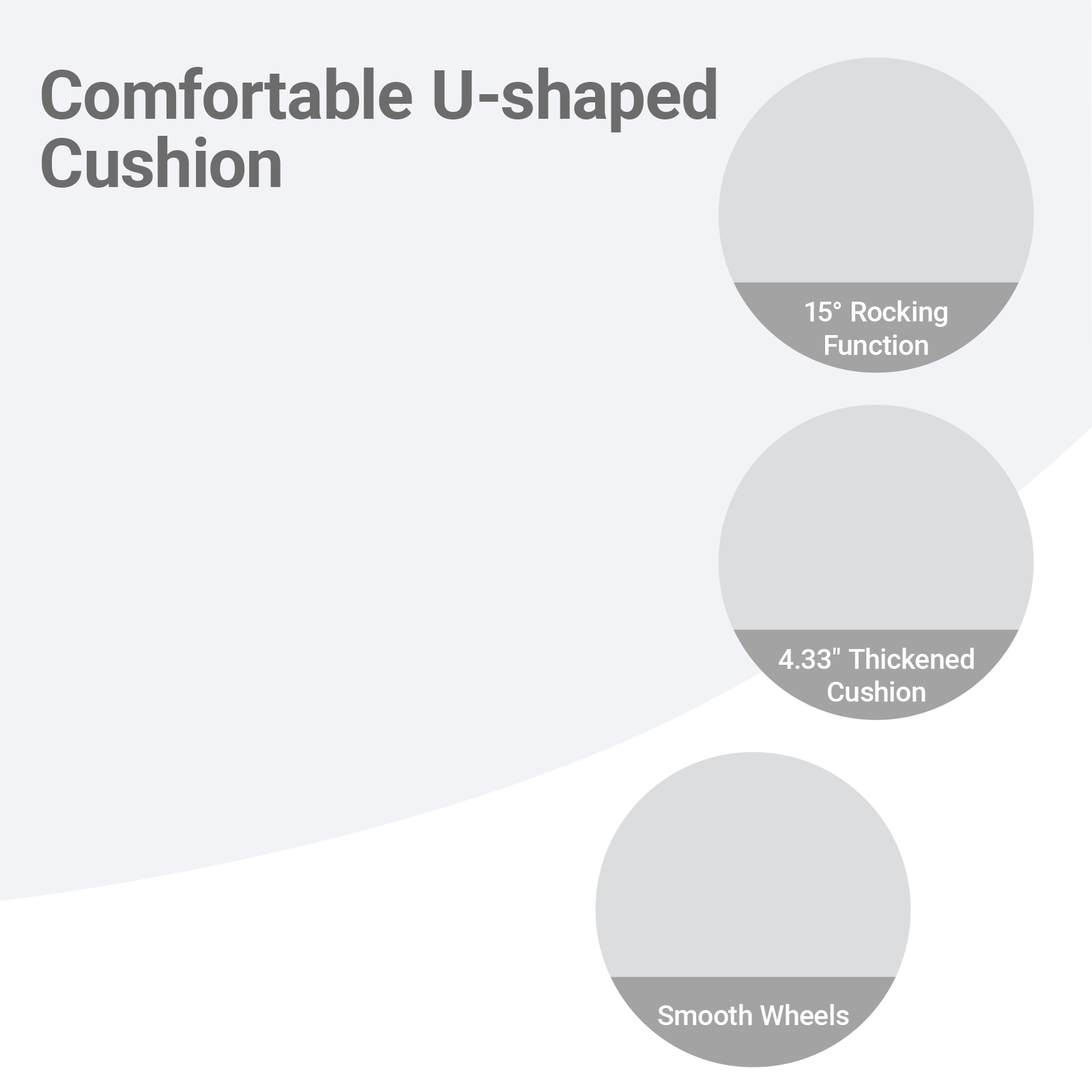
<style>
.page{position:relative;width:1092px;height:1092px;background:#f2f3f6}
.page>*{position:absolute;margin:0}
.t1{font:68.4px/68.4px "Roboto-Bold";color:#6c6c6c}
.t2{font:27.7px "Roboto-Medium";color:#ffffff}
</style>
<div class="page">
<p class="t1" style="left:42px;top:67px;width:674px;height:121px">Comfortable U-shaped<br>Cushion</p>
<p class="t2" style="left:805px;top:300px;width:142px;height:55px;text-align:center">15° Rocking<br>Function</p>
<p class="t2" style="left:779px;top:648px;width:195px;height:54px;text-align:center">4.33" Thickened<br>Cushion</p>
<p class="t2" style="left:658px;top:1004px;width:191px;height:21px">Smooth Wheels</p>
</div>
